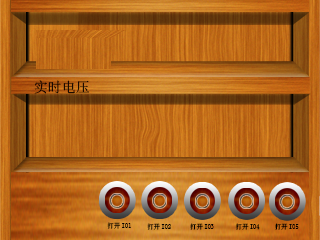
<style>
.page{position:relative;width:320px;height:240px}
.page>*{position:absolute;margin:0}
.t1{font:14px "SimSun"}
.t2{font:6.8px "SimSun";color:#000000;scale:0.95 1}
</style>
<div class="page">
<p class="t1" style="left:34px;top:80px;width:55px;height:14px">实时电压</p>
<p class="t2" style="left:107px;top:222px;width:24px;height:7px">打开IO1</p>
<p class="t2" style="left:147px;top:223px;width:24px;height:7px">打开IO2</p>
<p class="t2" style="left:190px;top:223px;width:24px;height:7px">打开IO3</p>
<p class="t2" style="left:235px;top:223px;width:25px;height:7px">打开IO4</p>
<p class="t2" style="left:275px;top:223px;width:24px;height:7px">打开IO5</p>
</div>
